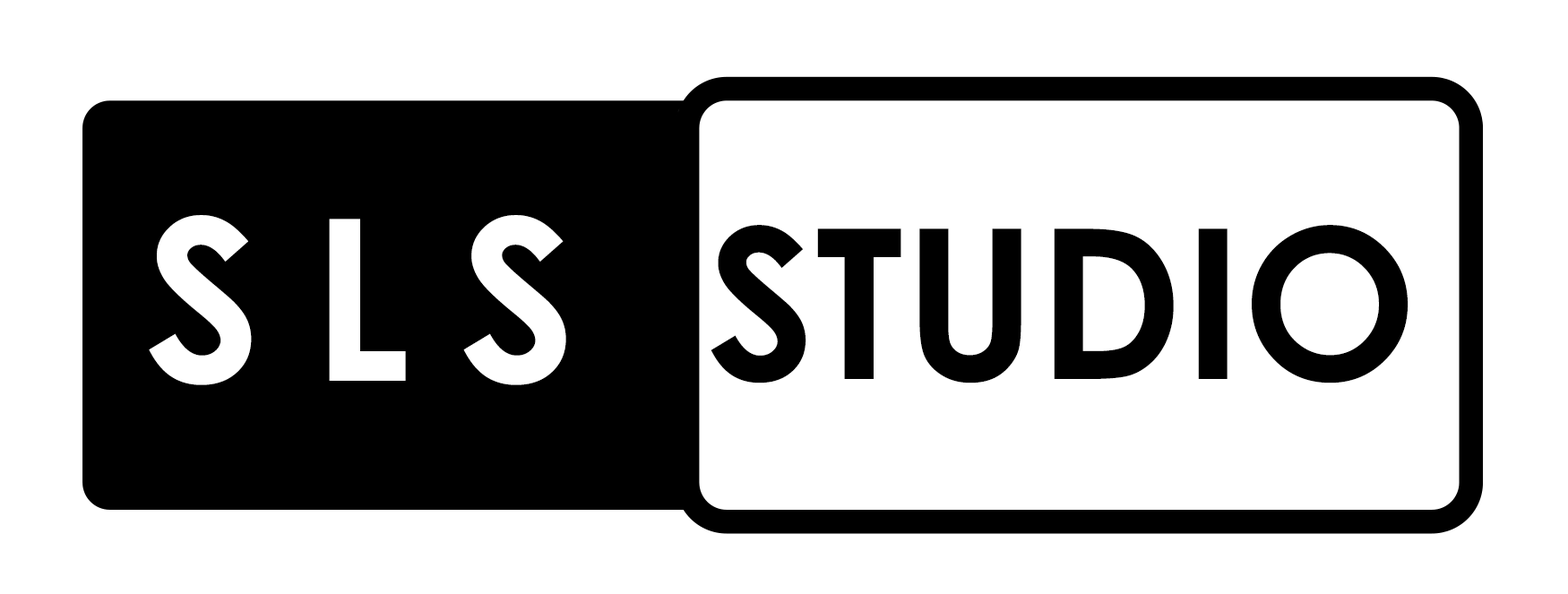
<style>
.page{position:relative;width:1568px;height:594px;background:#ffffff}
.page>*{position:absolute;margin:0}
.t1{font:224.8px "CenturyGothic-Bold";letter-spacing:0.22em;color:#ffffff}
.t2{font:209px "CenturyGothic-Bold";color:#000000}
</style>
<div class="page">
<p class="t1" style="left:149px;top:215px;width:417px;height:170px">SLS</p>
<p class="t2" style="left:711px;top:225px;width:698px;height:158px">STUDIO</p>
</div>
